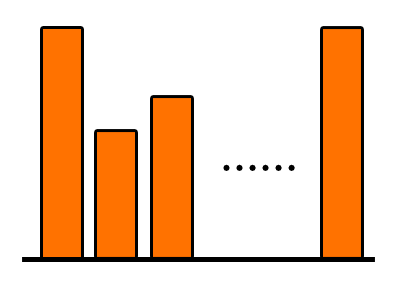
<style>
.page{position:relative;width:397px;height:287px;background:#ffffff}
.page>*{position:absolute;margin:0}
.t1{font:48px "MicrosoftYaHei";color:#000000}
</style>
<div class="page">
<p class="t1" style="left:223px;top:164px;width:72px;height:7px">……</p>
</div>
